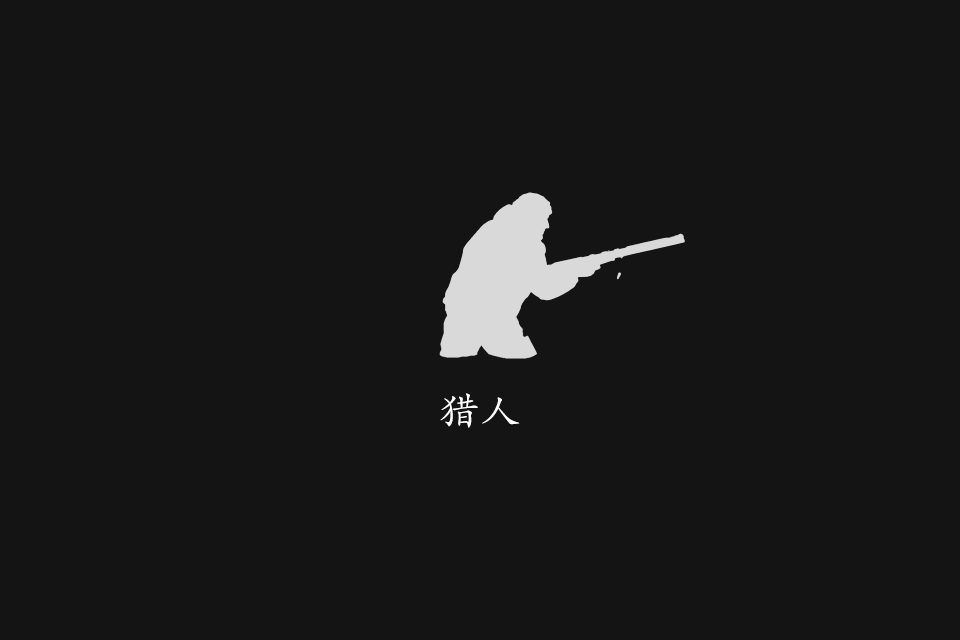
<style>
.page{position:relative;width:960px;height:640px;background:#141414}
.page>*{position:absolute;margin:0}
.t1{font:40px "STKaiti";color:#ffffff}
</style>
<div class="page">
<p class="t1" style="left:440px;top:393px;width:80px;height:35px">猎人</p>
</div>
